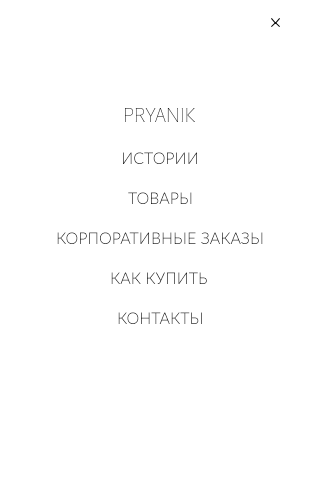
<style>
.page{position:relative;width:320px;height:480px;background:#ffffff}
.page>*{position:absolute;margin:0}
.t1{font:16px "Lato-Light"}
.t2{font:16px "Lato-Light";text-transform:uppercase}
</style>
<div class="page">
<p class="t1" style="left:123px;top:152px;width:74px;height:12px">ИСТОРИИ</p>
<p class="t1" style="left:128px;top:192px;width:64px;height:12px">ТОВАРЫ</p>
<p class="t2" style="left:57px;top:232px;width:206px;height:12px">Корпоративные заказы</p>
<p class="t2" style="left:111px;top:272px;width:96px;height:12px">Как купить</p>
<p class="t1" style="left:118px;top:312px;width:84px;height:12px">КОНТАКТЫ</p>
</div>
